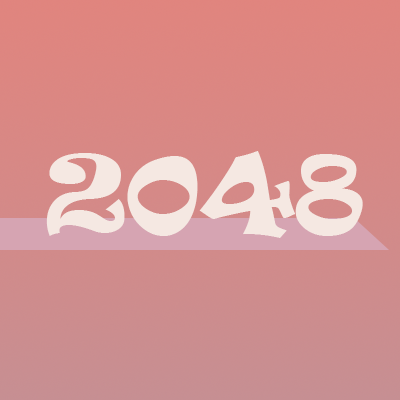
<style>
.page{position:relative;width:400px;height:400px}
.page>*{position:absolute;margin:0}
.t1{font:100px "Ravie";color:#f5e8e2}
</style>
<div class="page">
<p class="t1" style="left:46px;top:151px;width:317px;height:87px">2048</p>
</div>
